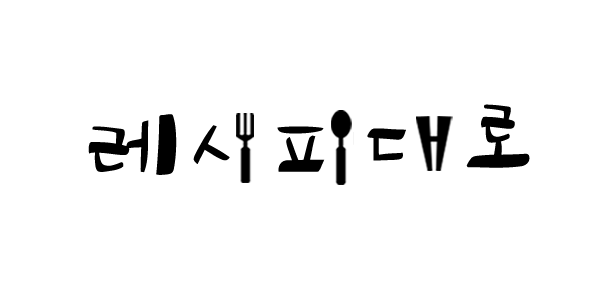
<style>
.page{position:relative;width:600px;height:300px;background:#ffffff}
.page>*{position:absolute;margin:0}
.t1{font:146px "TTGGotggasinL";color:#000000}
</style>
<div class="page">
<p class="t1" style="left:88px;top:104px;width:442px;height:71px">레시피대로</p>
</div>
